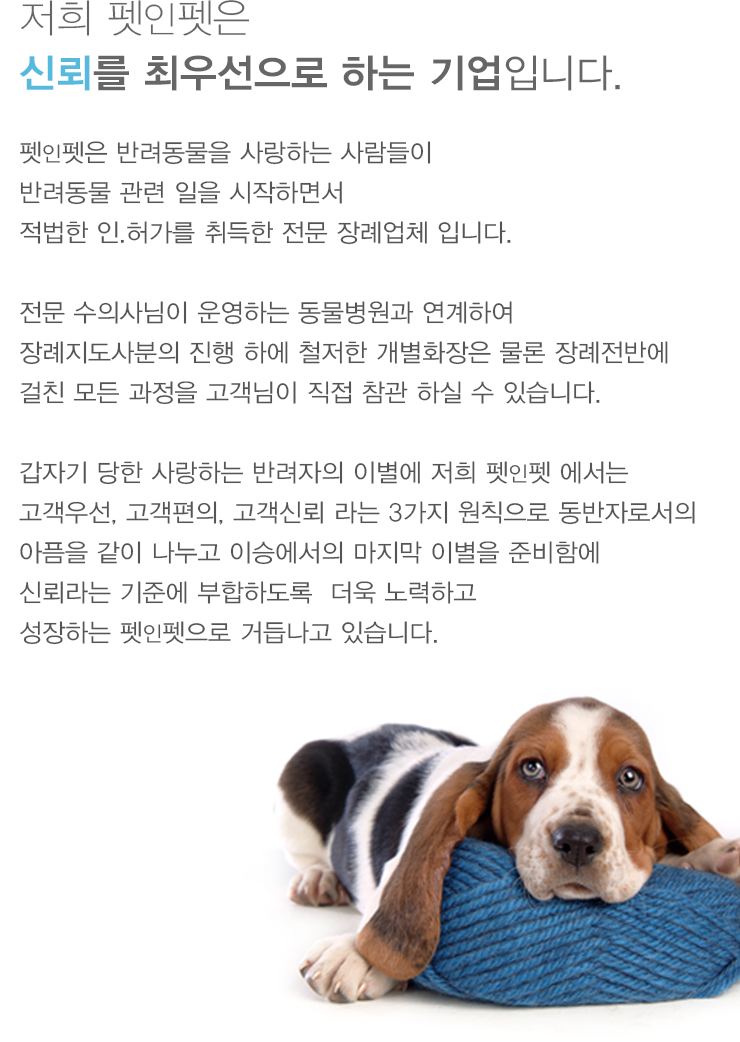
<style>
.page{position:relative;width:740px;height:1042px;background:#ffffff}
.page>*{position:absolute;margin:0}
.t1{font:40px/55px "YDVYGO34";color:#666666}
.t2{font:40px/55px "YDVYGO31";color:#666666}
.t3{font:36px/55px "YDVYGO31";color:#666666}
.t4{font:40px/55px "YDVYGO34";color:#56badf}
.t5{font:40px/55px "YDVYGO32";color:#666666}
.t6{font:25px/40px "YDVYGO32";color:#555555}
.t7{font:21px/40px "YDVYGO32";color:#555555}
</style>
<div class="page">
<p class="t1" style="left:19px;top:0px;width:601px;height:91px"><span class="t2">저희 펫</span><span class="t3">인</span><span class="t2">펫은 <br></span><span class="t4">신뢰</span>를 최우선으로 하는 기업<span class="t5">입니다.</span></p>
<p class="t6" style="left:19px;top:141px;width:676px;height:504px">펫<span class="t7">인</span>펫은 반려동물을 사랑하는 사람들이<br>반려동물 관련 일을 시작하면서<br>적법한 인.허가를 취득한 전문 장례업체 입니다.<br><br>전문 수의사님이 운영하는 동물병원과 연계하여<br>장례지도사분의 진행 하에 철저한 개별화장은 물론 장례전반에<br>걸친 모든 과정을 고객님이 직접 참관 하실 수 있습니다. <br><br>갑자기 당한 사랑하는 반려자의 이별에 저희 펫<span class="t7">인</span>펫 에서는<br>고객우선, 고객편의, 고객신뢰 라는 3가지 원칙으로 동반자로서의<br>아픔을 같이 나누고 이승에서의 마지막 이별을 준비함에<br>신뢰라는 기준에 부합하도록  더욱 노력하고<br>성장하는 펫<span class="t7">인</span>펫으로 거듭나고 있습니다.</p>
</div>
